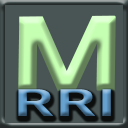
<style>
.page{position:relative;width:128px;height:128px;background:#485554}
.page>*{position:absolute;margin:0}
.t1{font:91.2px "HGPGothicE";font-weight:bold;scale:1.74 1}
.t2{font:32.9px "HGPGothicE";font-weight:bold;scale:1.88 1}
</style>
<div class="page">
<p class="t1" style="left:18px;top:15px;width:98px;height:77px;rotate:-1deg">M</p>
<p class="t2" style="left:18px;top:89px;width:93px;height:27px">RRI</p>
</div>
